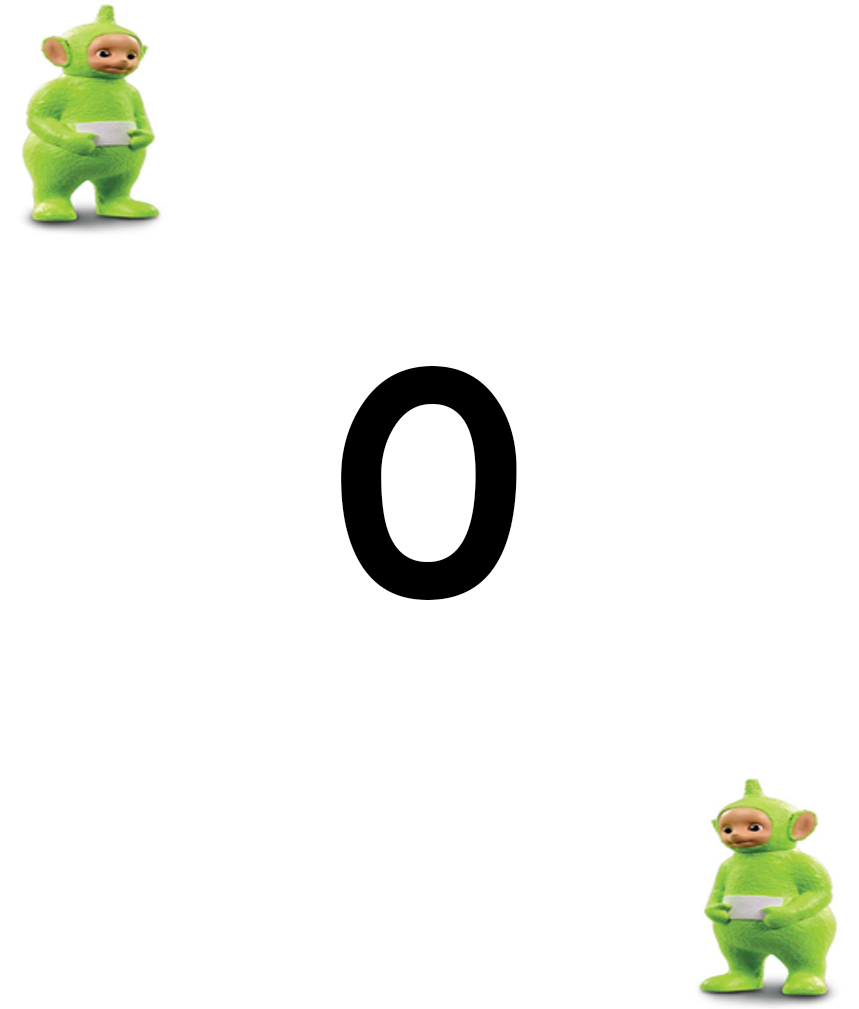
<style>
.page{position:relative;width:859px;height:1009px;background:#ffffff}
.page>*{position:absolute;margin:0}
.t1{font:300px "ComicSansMS-Bold";color:#000000;font-variant:small-caps}
</style>
<div class="page">
<p class="t1" style="left:341px;top:366px;width:176px;height:234px">0</p>
</div>
